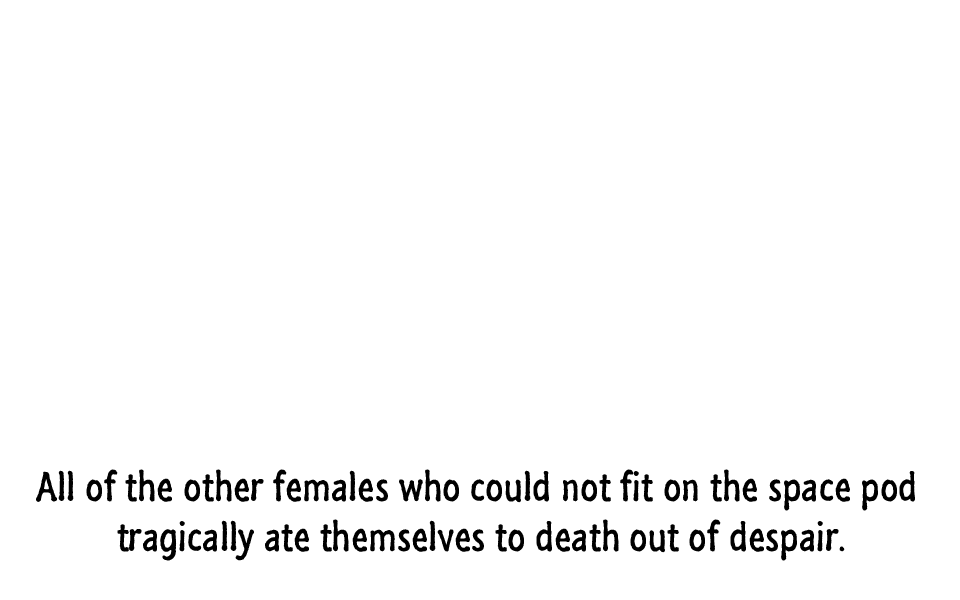
<style>
.page{position:relative;width:960px;height:600px;background:#ffffff}
.page>*{position:absolute;margin:0}
.t1{font:42px "SegoeMarker";color:#000000}
</style>
<div class="page">
<p class="t1" style="left:36px;top:469px;width:879px;height:92px;text-align:center">All of the other females who could not fit on the space pod <br>tragically ate themselves to death out of despair.</p>
</div>
